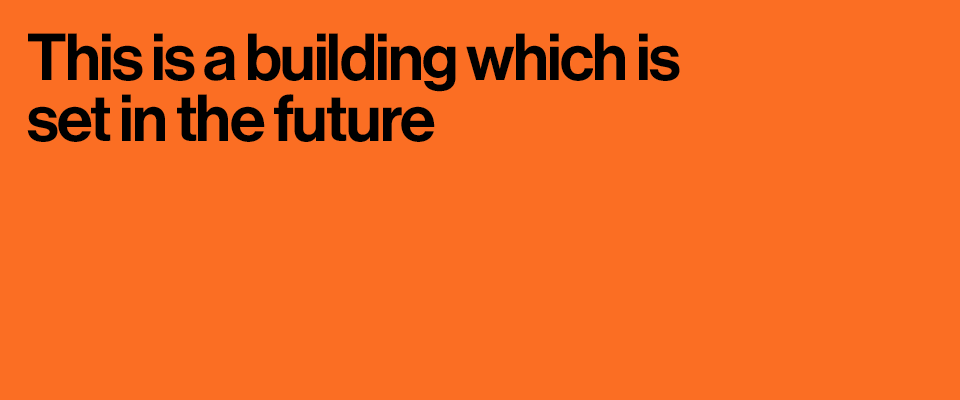
<style>
.page{position:relative;width:960px;height:400px;background:#fb6e23}
.page>*{position:absolute;margin:0}
.t1{font:65px/61px "NHaasGroteskDSPro-65Md";letter-spacing:-0.025em;color:#000000}
</style>
<div class="page">
<p class="t1" style="left:27px;top:33px;width:653px;height:109px">This is a building which is <br>set in the future</p>
</div>
